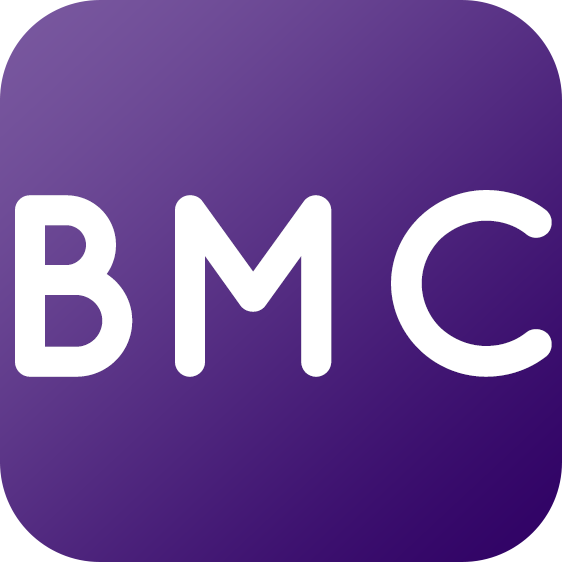
<style>
.page{position:relative;width:562px;height:562px}
.page>*{position:absolute;margin:0}
.t1{font:441.2px "Quicksand-Bold";color:#ffffff;font-weight:bold}
</style>
<div class="page">
<p class="t1" style="left:15px;top:190px;width:537px;height:187px">BMC</p>
</div>
